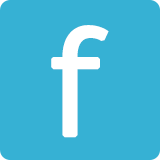
<style>
.page{position:relative;width:160px;height:160px;background:#36b1d4}
.page>*{position:absolute;margin:0}
.t1{font:145.6px "Raleway-Regular";color:#ffffff;font-weight:bold;scale:1.07 1}
</style>
<div class="page">
<p class="t1" style="left:51px;top:25px;width:58px;height:113px">f</p>
</div>
